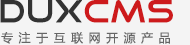
<style>
.page{position:relative;width:190px;height:45px;background:#f4f4f4}
.page>*{position:absolute;margin:0}
.t1{font:30px "GoodTimes";color:#333333;font-weight:bold}
.t2{font:30px "GoodTimes";color:#cd1a1c;font-weight:bold}
.t3{font:12px "MicrosoftYaHei";letter-spacing:0.46em;color:#666666}
</style>
<div class="page">
<p class="t1" style="left:0px;top:0px;width:173px;height:23px">DUX<span class="t2">CMS</span></p>
<p class="t3" style="left:1px;top:31px;width:169px;height:13px">专注于互联网开源产品</p>
</div>
